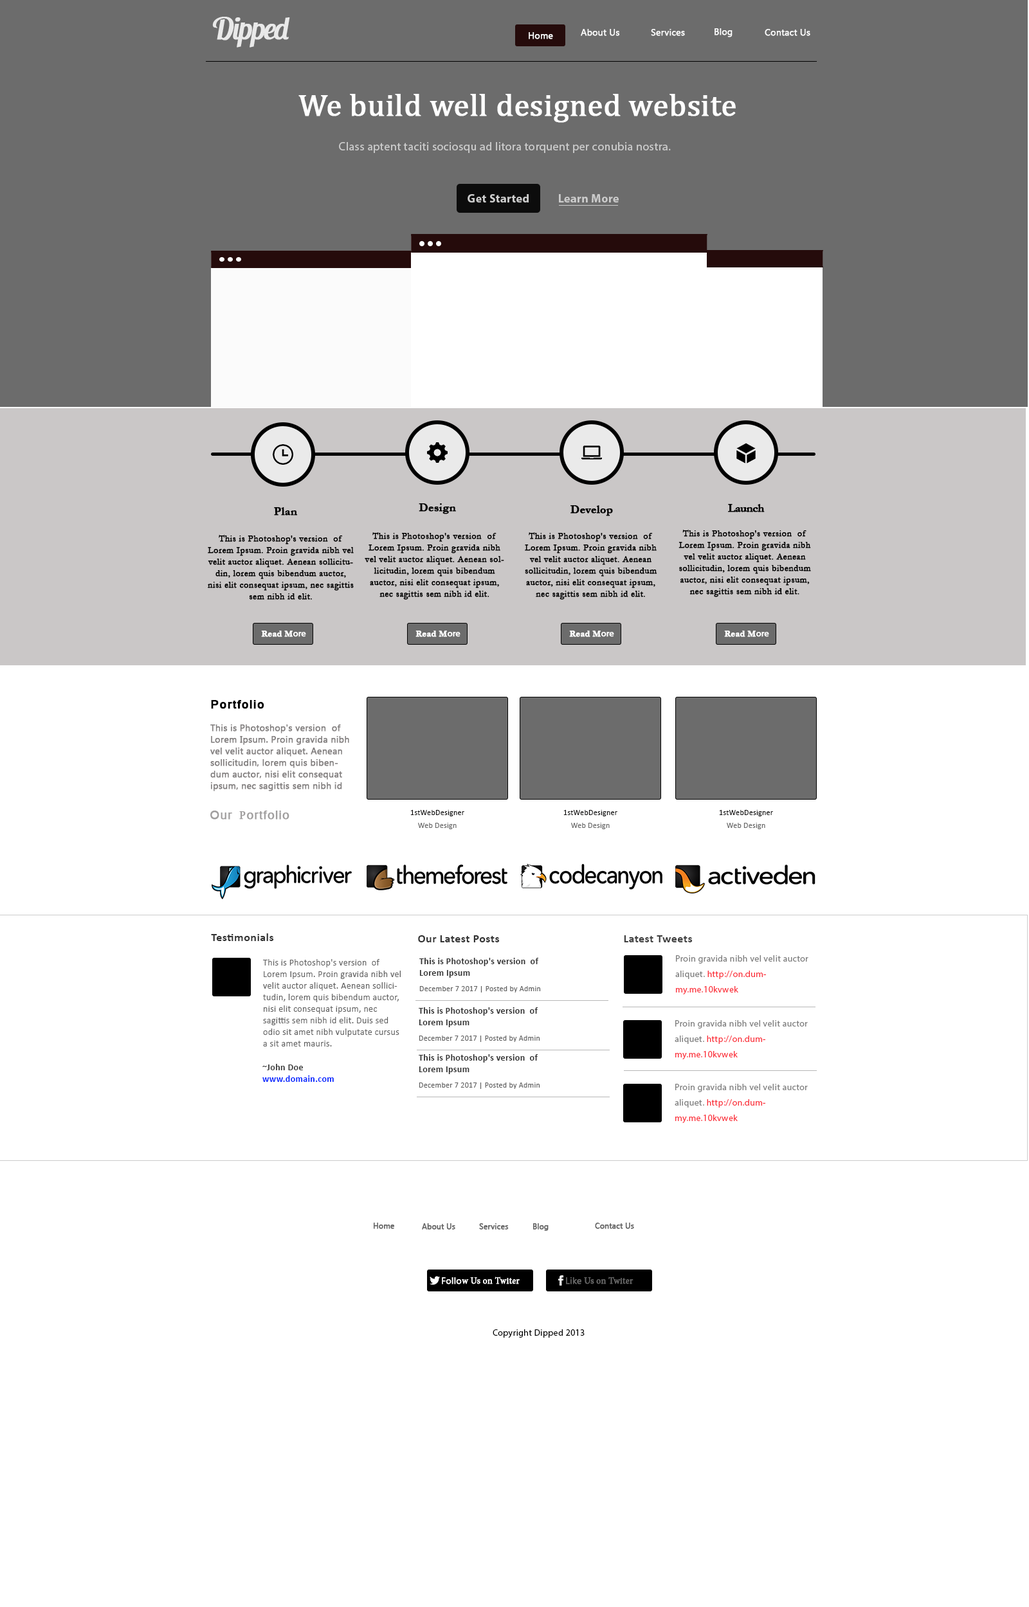
<style>
.page{position:relative;width:1029px;height:1607px;background:#ffffff}
.page>*{position:absolute;margin:0}
.t1{font:30.9px "LobsterTwo";letter-spacing:-0.05em;color:#e9e9e9;font-weight:bold;font-style:italic}
.t2{font:9px "KhmerUI";color:#ffffff;font-weight:bold}
.t3{font:30.9px "Cambria";color:#ffffff;font-weight:bold}
.t4{font:11.6px "MyriadPro-Regular";letter-spacing:0.025em;color:#cccccc}
.t5{font:11.6px "MyriadPro-Bold";letter-spacing:0.025em;color:#cccccc}
.t6{font:11.6px "Garamond-Bold";color:#000000;font-weight:bold}
.t7{font:11.6px "Garamond-Bold";letter-spacing:-0.05em;color:#000000;font-weight:bold}
.t8{font:9px/11.6px "Garamond";letter-spacing:0.025em;color:#000000;font-weight:bold}
.t9{font:9px "Garamond-Bold";color:#ffffff;font-weight:bold}
.t10{font:9px "MyriadPro-Regular";color:#ffffff;font-weight:bold}
.t11{font:11.6px "Mangal-Bold";letter-spacing:0.05em;color:#000000;font-weight:bold}
.t12{font:9px/11.6px "LaoUI";letter-spacing:0.01em;color:#838080;font-weight:bold}
.t13{font:11.6px "Mangal";letter-spacing:0.05em;color:#a09e9e;font-weight:bold}
.t14{font:11.6px "MinionPro-Regular";letter-spacing:0.05em;color:#a09e9e;font-weight:bold}
.t15{font:7.7px/6.4px "Calibri";letter-spacing:0.025em;color:#0b0a0a}
.t16{font:7.7px/6.4px "Calibri";letter-spacing:0.025em;color:#666666}
.t17{font:11.6px "Calibri-Bold";letter-spacing:0.025em;color:#333333}
.t18{font:11.6px "Calibri-Bold";letter-spacing:0.025em;color:#3f3f3f}
.t19{font:9px/11.6px "Calibri";letter-spacing:0.025em;color:#5f5f5f}
.t20{font:9px/11.6px "Calibri-Bold";letter-spacing:0.025em;color:#333333}
.t21{font:7.7px/15.4px "Calibri";letter-spacing:0.025em;color:#5f5f5f}
.t22{font:9px/15.4px "MyriadPro-Regular";letter-spacing:0.025em;color:#7d7d7d}
.t23{font:9px/15.4px "MyriadPro-Regular";letter-spacing:0.025em;color:#fb2f3a}
.t24{font:9px/11.6px "Calibri-Bold";letter-spacing:0.025em;color:#0024ff}
.t25{font:9px/11.6px "Calibri-Bold";letter-spacing:0.025em;color:#3a3a3a}
.t26{font:7.7px "KhmerUI";color:#666666;font-weight:bold}
.t27{font:9px "MinionPro-Regular";color:#ffffff;font-weight:bold}
.t28{font:9px "MinionPro-Regular";color:#666666;font-weight:bold}
.t29{font:9px "KhmerUI";color:#666666;font-weight:bold}
.t30{font:9px "MyriadPro-Regular";letter-spacing:0.025em;color:#000000}
</style>
<div class="page">
<p class="t1" style="left:212px;top:17px;width:78px;height:31px">Dipped</p>
<p class="t2" style="left:580px;top:29px;width:40px;height:7px">About Us</p>
<p class="t2" style="left:651px;top:29px;width:34px;height:7px">Services</p>
<p class="t2" style="left:714px;top:28px;width:18px;height:9px">Blog</p>
<p class="t2" style="left:764px;top:29px;width:46px;height:7px">Contact Us</p>
<p class="t2" style="left:528px;top:32px;width:25px;height:7px">Home</p>
<p class="t3" style="left:298px;top:94px;width:437px;height:29px">We build well designed website</p>
<p class="t4" style="left:339px;top:142px;width:331px;height:11px">Class aptent taciti sociosqu ad litora torquent per conubia nostra.</p>
<p class="t5" style="left:467px;top:194px;width:61px;height:9px">Get Started</p>
<p class="t5" style="left:559px;top:194px;width:59px;height:9px">Learn More</p>
<p class="t6" style="left:274px;top:507px;width:24px;height:9px">Plan</p>
<p class="t6" style="left:419px;top:503px;width:37px;height:11px">Design</p>
<p class="t6" style="left:570px;top:505px;width:43px;height:11px">Develop</p>
<p class="t7" style="left:728px;top:504px;width:36px;height:8px">Launch</p>
<p class="t8" style="left:364px;top:532px;width:140px;height:68px;text-align:center">This is Photoshop's version  of Lorem Ipsum. Proin gravida nibh vel velit auctor aliquet. Aenean sollicitudin, lorem quis bibendum auctor, nisi elit consequat ipsum, nec sagittis sem nibh id elit.</p>
<p class="t8" style="left:525px;top:532px;width:132px;height:68px;text-align:center">This is Photoshop's version  of Lorem Ipsum. Proin gravida nibh vel velit auctor aliquet. Aenean sollicitudin, lorem quis bibendum auctor, nisi elit consequat ipsum, nec sagittis sem nibh id elit.</p>
<p class="t8" style="left:678px;top:530px;width:133px;height:67px;text-align:center">This is Photoshop's version  of Lorem Ipsum. Proin gravida nibh vel velit auctor aliquet. Aenean sollicitudin, lorem quis bibendum auctor, nisi elit consequat ipsum, nec sagittis sem nibh id elit.</p>
<p class="t8" style="left:208px;top:535px;width:146px;height:65px;text-align:center">This is Photoshop's version  of Lorem Ipsum. Proin gravida nibh vel velit auctor aliquet. Aenean sollicitudin, lorem quis bibendum auctor, nisi elit consequat ipsum, nec sagittis sem nibh id elit.</p>
<p class="t9" style="left:261px;top:631px;width:45px;height:6px">Read M<span class="t10">ore</span></p>
<p class="t9" style="left:415px;top:631px;width:45px;height:6px">Read M<span class="t10">ore</span></p>
<p class="t9" style="left:569px;top:631px;width:45px;height:6px">Read M<span class="t10">ore</span></p>
<p class="t9" style="left:724px;top:631px;width:45px;height:6px">Read M<span class="t10">ore</span></p>
<p class="t11" style="left:211px;top:700px;width:53px;height:9px">Portfolio</p>
<p class="t12" style="left:210px;top:724px;width:139px;height:67px">This is Photoshop's version  of Lorem Ipsum. Proin gravida nibh vel velit auctor aliquet. Aenean sollicitudin, lorem quis bibendum auctor, nisi elit consequat ipsum, nec sagittis sem nibh id elit.</p>
<p class="t13" style="left:210px;top:811px;width:79px;height:9px">Our <span class="t14">P</span>ortfolio</p>
<p class="t15" style="left:410px;top:810px;width:54px;height:19px;text-align:center">1stWebDesigner<br><br><span class="t16">Web Design</span></p>
<p class="t15" style="left:563px;top:810px;width:54px;height:19px;text-align:center">1stWebDesigner<br><br><span class="t16">Web Design</span></p>
<p class="t15" style="left:719px;top:810px;width:54px;height:19px;text-align:center">1stWebDesigner<br><br><span class="t16">Web Design</span></p>
<p class="t17" style="left:211px;top:933px;width:63px;height:8px">Testimonials</p>
<p class="t17" style="left:418px;top:935px;width:82px;height:7px">Our Latest Posts</p>
<p class="t18" style="left:624px;top:935px;width:68px;height:7px">Latest Tweets</p>
<p class="t19" style="left:263px;top:959px;width:138px;height:88px">This is Photoshop's version  of Lorem Ipsum. Proin gravida nibh vel velit auctor aliquet. Aenean sollicitudin, lorem quis bibendum auctor, nisi elit consequat ipsum, nec sagittis sem nibh id elit. Duis sed odio sit amet nibh vulputate cursus a sit amet mauris.</p>
<p class="t20" style="left:419px;top:958px;width:122px;height:35px">This is Photoshop's version  of Lorem Ipsum<br><span class="t21">December 7 2017 | Posted by Admin</span></p>
<p class="t22" style="left:675px;top:955px;width:133px;height:40px">Proin gravida nibh vel velit auctor aliquet. <span class="t23">http://on.dummy.me.10kvwek</span></p>
<p class="t20" style="left:419px;top:1007px;width:121px;height:35px">This is Photoshop's version  of Lorem Ipsum<br><span class="t21">December 7 2017 | Posted by Admin</span></p>
<p class="t22" style="left:674px;top:1020px;width:133px;height:39px">Proin gravida nibh vel velit auctor aliquet. <span class="t23">http://on.dummy.me.10kvwek</span></p>
<p class="t20" style="left:419px;top:1054px;width:121px;height:35px">This is Photoshop's version  of Lorem Ipsum<br><span class="t21">December 7 2017 | Posted by Admin</span></p>
<p class="t24" style="left:262px;top:1064px;width:72px;height:18px"><span class="t25">~John Doe <br></span>www.domain.com</p>
<p class="t22" style="left:674px;top:1084px;width:133px;height:39px">Proin gravida nibh vel velit auctor aliquet. <span class="t23">http://on.dummy.me.10kvwek</span></p>
<p class="t26" style="left:374px;top:1223px;width:20px;height:6px">Home</p>
<p class="t26" style="left:422px;top:1223px;width:33px;height:7px">About Us</p>
<p class="t26" style="left:479px;top:1223px;width:30px;height:7px">Services</p>
<p class="t26" style="left:533px;top:1223px;width:15px;height:8px">Blog</p>
<p class="t26" style="left:595px;top:1223px;width:39px;height:6px">Contact Us</p>
<p class="t27" style="left:442px;top:1277px;width:77px;height:7px"><span class="t2">Follo</span>w Us on Twiter</p>
<p class="t28" style="left:566px;top:1277px;width:67px;height:7px"><span class="t29">Like</span> Us on Twiter</p>
<p class="t30" style="left:492px;top:1329px;width:92px;height:9px">Copyright Dipped 2013</p>
</div>
